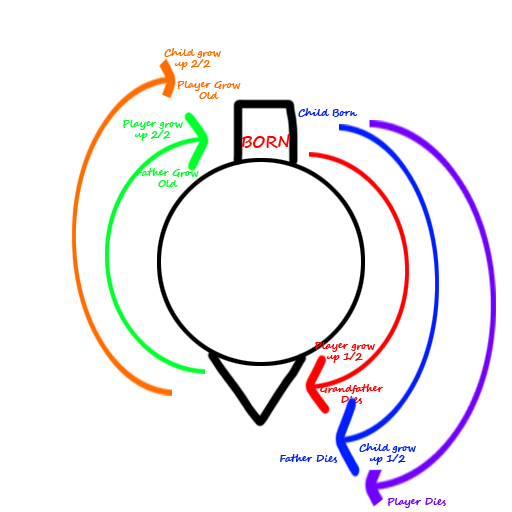
<style>
.page{position:relative;width:512px;height:512px;background:#ffffff}
.page>*{position:absolute;margin:0}
.t1{font:9.5px "SegoeScript-Bold";color:#ff6c00}
.t2{font:9.5px "SegoeScript-Bold";color:#001eff}
.t3{font:9.5px "SegoeScript-Bold";color:#00ff2a}
.t4{font:15.5px "SegoeScript-Bold";color:#ff0000}
.t5{font:9.5px "SegoeScript-Bold";color:#ff0000}
.t6{font:9.5px "SegoeScript-Bold";color:#7200ff}
</style>
<div class="page">
<p class="t1" style="left:164px;top:48px;width:57px;height:22px;text-align:center">Child grow up 2/2</p>
<p class="t1" style="left:177px;top:81px;width:64px;height:18px;text-align:center">Player Grow Old</p>
<p class="t2" style="left:298px;top:108px;width:60px;height:9px">Child Born</p>
<p class="t3" style="left:122px;top:120px;width:61px;height:21px;text-align:center">Player grow up 2/2</p>
<p class="t4" style="left:242px;top:134px;width:48px;height:14px">BORN</p>
<p class="t3" style="left:136px;top:168px;width:63px;height:19px;text-align:center">Father Grow Old</p>
<p class="t5" style="left:314px;top:342px;width:61px;height:21px;text-align:center">Player grow up 1/2</p>
<p class="t5" style="left:320px;top:384px;width:64px;height:20px;text-align:center">Grandfather Dies</p>
<p class="t2" style="left:359px;top:443px;width:57px;height:22px;text-align:center">Child grow up 1/2</p>
<p class="t2" style="left:280px;top:454px;width:58px;height:9px">Father Dies</p>
<p class="t6" style="left:387px;top:498px;width:59px;height:10px">Player Dies</p>
</div>
